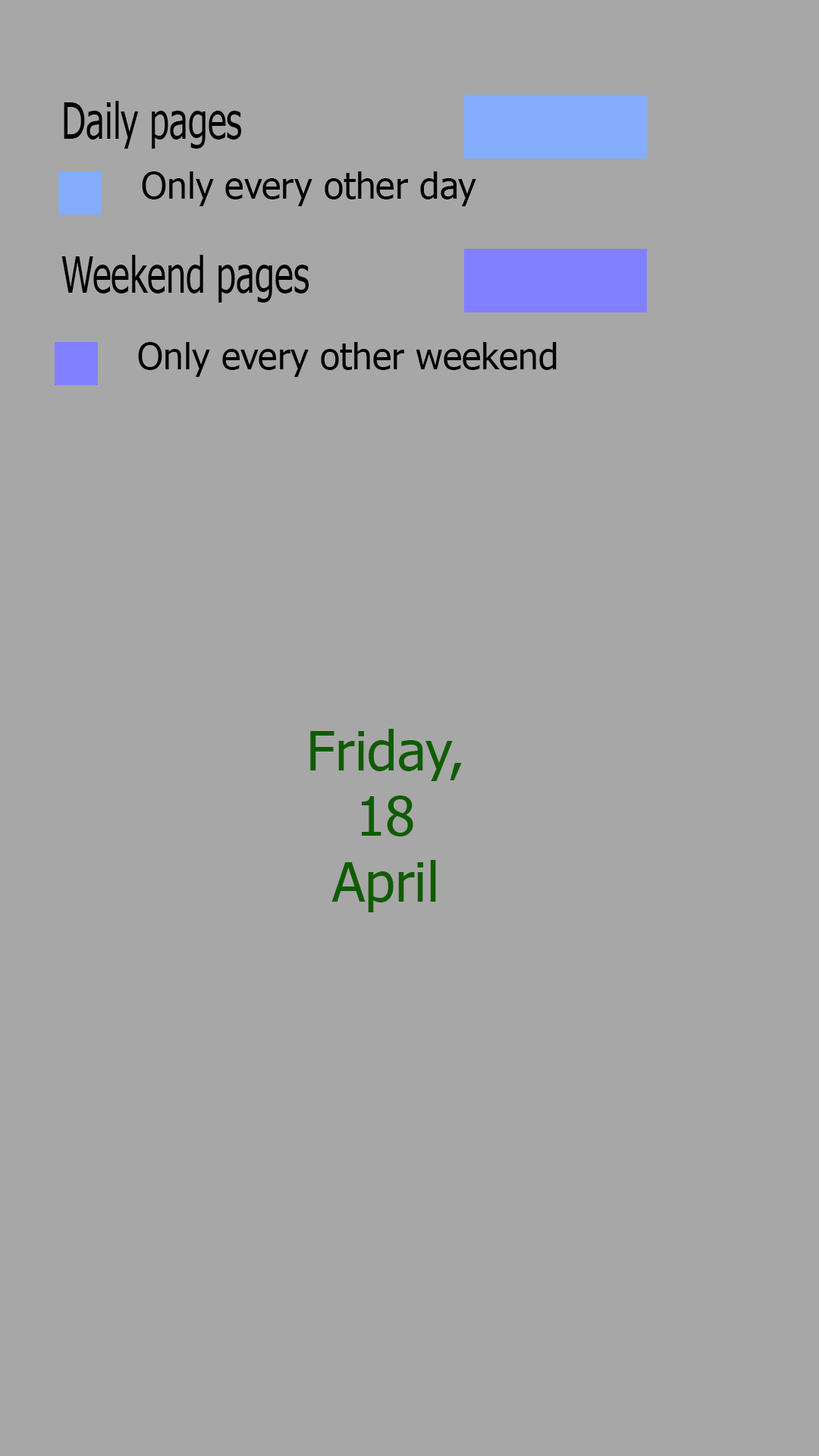
<style>
.page{position:relative;width:819px;height:1456px;background:#a7a7a7}
.page>*{position:absolute;margin:0}
.t1{font:50.4px "Tahoma";color:#000000;scale:0.71 1}
.t2{font:36.4px "Tahoma";color:#000000}
.t3{font:54.6px "Tahoma";color:#0f5c00}
</style>
<div class="page">
<p class="t1" style="left:64px;top:101px;width:178px;height:48px">Daily pages</p>
<p class="t2" style="left:142px;top:171px;width:334px;height:35px">Only every other day</p>
<p class="t1" style="left:61px;top:255px;width:248px;height:48px">Weekend pages</p>
<p class="t2" style="left:138px;top:342px;width:419px;height:35px">Only every other weekend</p>
<p class="t3" style="left:310px;top:729px;width:152px;height:183px;text-align:center">Friday, <br>18 <br>April</p>
</div>
